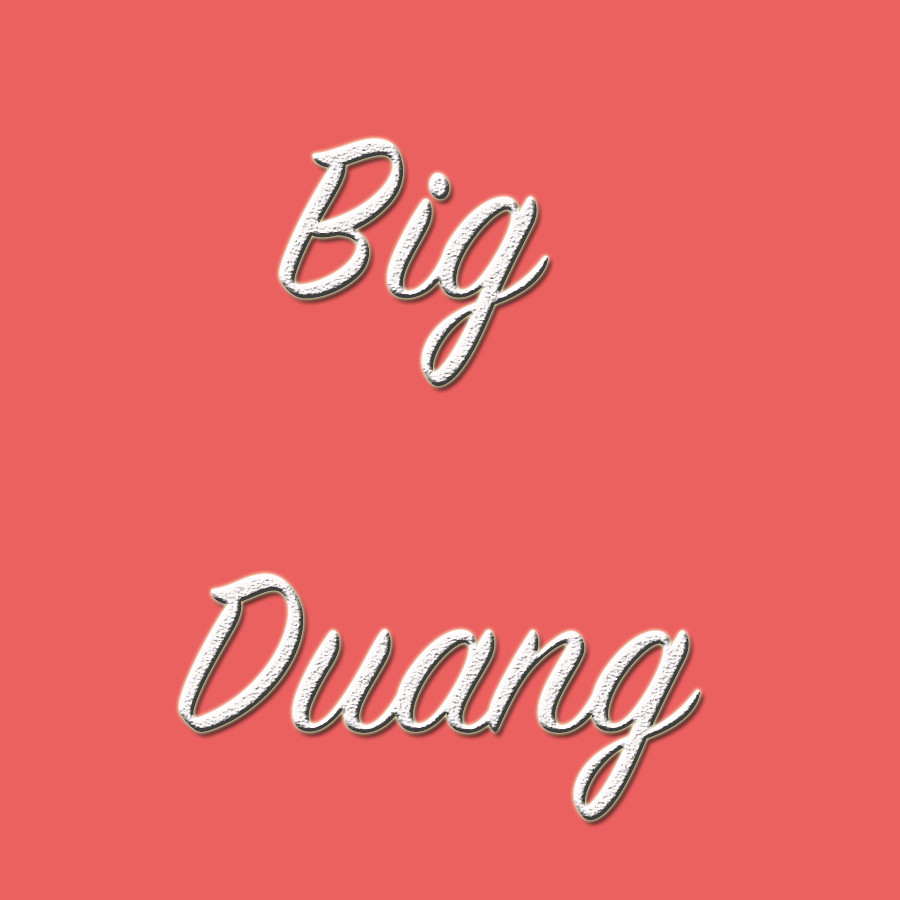
<style>
.page{position:relative;width:900px;height:900px;background:#eb615f}
.page>*{position:absolute;margin:0}
.t1{font:248px "SignPainter-HouseScript"}
.t2{font:248px "PTSans-NarrowBold"}
</style>
<div class="page">
<p class="t1" style="left:178px;top:138px;width:522px;height:683px"><span class="t2">  </span>Big<br>Duang</p>
</div>
